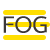
<style>
.page{position:relative;width:50px;height:50px;background:#ffffff}
.page>*{position:absolute;margin:0}
.t1{font:34.1px "THSarabunPSK-Bold";color:#3c3837}
</style>
<div class="page">
<p class="t1" style="left:3px;top:16px;width:44px;height:17px">FOG</p>
</div>
